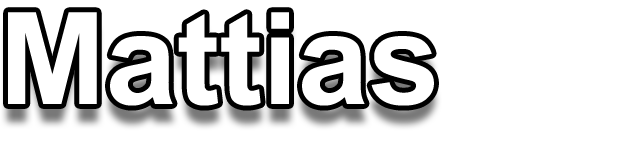
<style>
.page{position:relative;width:630px;height:150px;background:#ffffff}
.page>*{position:absolute;margin:0}
.t1{font:128px "Arial-BoldMT";color:#ffffff}
</style>
<div class="page">
<p class="t1" style="left:8px;top:12px;width:426px;height:94px">Mattias</p>
</div>
